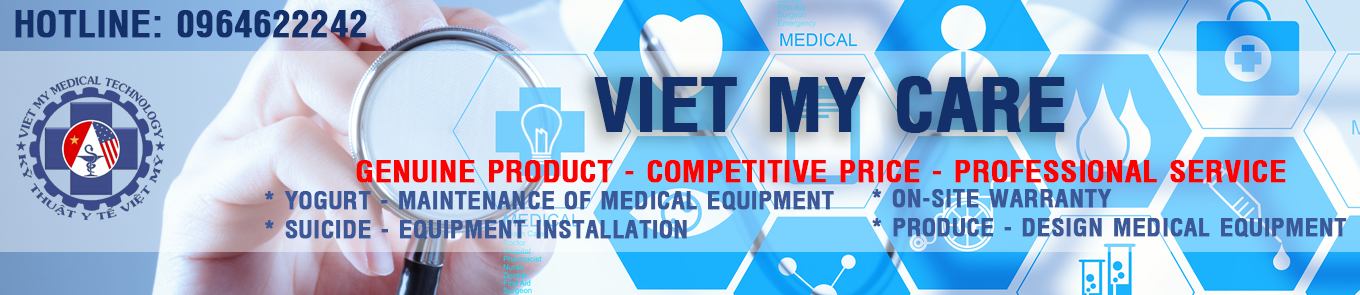
<style>
.page{position:relative;width:1360px;height:295px}
.page>*{position:absolute;margin:0}
.t1{font:36px "VNI-Helve-Condense-Bold";color:#13306b;font-weight:bold}
.t2{font:72px "VNI-Helve-Condense-Bold";color:#13306b;font-weight:bold}
.t3{font:30px "VNI-Helve-Condense-Bold";color:#ff0000;font-weight:bold}
.t4{font:24px "VNI-Helve-Condense-Bold";color:#3b5998;font-weight:bold}
</style>
<div class="page">
<p class="t1" style="left:15px;top:10px;width:352px;height:28px">HOTLINE: 0964622242</p>
<p class="t2" style="left:594px;top:76px;width:471px;height:57px">VIET MY CARE</p>
<p class="t3" style="left:356px;top:160px;width:930px;height:23px">GENUINE PRODUCT - COMPETITIVE PRICE - PROFESSIONAL SERVICE</p>
<p class="t4" style="left:265px;top:191px;width:569px;height:49px">* YOGURT - MAINTENANCE OF MEDICAL EQUIPMENT<br>* SUICIDE - EQUIPMENT INSTALLATION</p>
<p class="t4" style="left:872px;top:189px;width:475px;height:49px">* ON-SITE WARRANTY<br>* PRODUCE - DESIGN MEDICAL EQUIPMENT</p>
</div>
